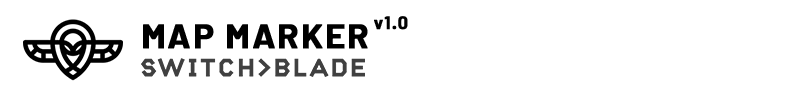
<style>
.page{position:relative;width:796px;height:100px;background:#ffffff}
.page>*{position:absolute;margin:0}
.t1{font:18px "Barlow-Bold";letter-spacing:0.05em;color:#000000;font-weight:bold}
.t2{font:34px "Barlow-Bold";letter-spacing:0.05em;color:#000000;font-weight:bold}
</style>
<div class="page">
<p class="t1" style="left:374px;top:16px;width:34px;height:14px">v1.0</p>
<p class="t2" style="left:143px;top:24px;width:225px;height:25px">MAP MARKER</p>
</div>
